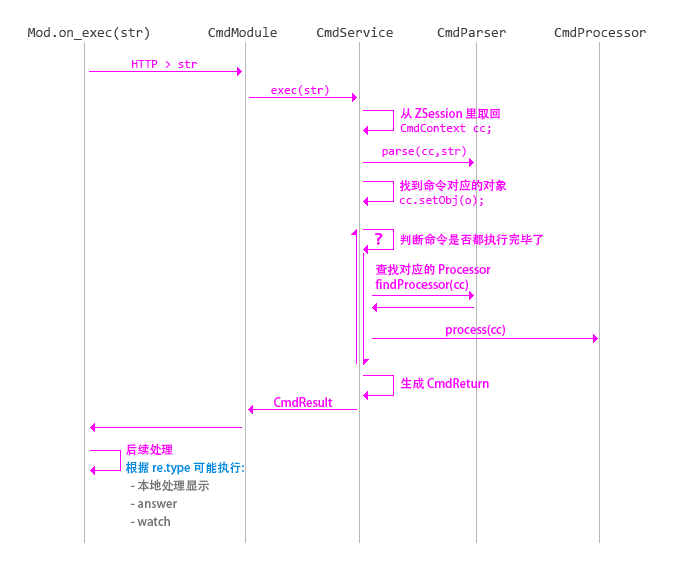
<style>
.page{position:relative;width:681px;height:565px;background:#ffffff}
.page>*{position:absolute;margin:0}
.t1{font:14px "Consolas";color:#404040}
.t2{font:12px "Consolas";color:#ff00ff}
.t3{font:12px "AdobeHeitiStd-Regular";color:#ff00ff}
.t4{font:12px/18px "AdobeHeitiStd-Regular";color:#767676}
.t5{font:12px/18px "AdobeHeitiStd-Regular";color:#ff00ff}
.t6{font:12px/18px "AdobeHeitiStd-Regular";color:#008ee3}
</style>
<div class="page">
<p class="t1" style="left:28px;top:27px;width:121px;height:13px">Mod.on_exec(str)</p>
<p class="t1" style="left:208px;top:27px;width:69px;height:10px">CmdModule</p>
<p class="t1" style="left:317px;top:27px;width:76px;height:10px">CmdService</p>
<p class="t1" style="left:437px;top:27px;width:69px;height:10px">CmdParser</p>
<p class="t1" style="left:554px;top:27px;width:92px;height:10px">CmdProcessor</p>
<p class="t2" style="left:132px;top:60px;width:66px;height:8px">HTTP &gt; str</p>
<p class="t2" style="left:271px;top:85px;width:58px;height:11px">exec(str)</p>
<p class="t3" style="left:400px;top:108px;width:100px;height:26px">从 ZSession 里取回<br><span class="t2">CmdContext cc;</span></p>
<p class="t2" style="left:382px;top:146px;width:84px;height:11px">parse(cc,str)</p>
<p class="t2" style="left:399px;top:179px;width:108px;height:27px"><span class="t3">找到命令对应的对象<br></span>cc.setObj(o);</p>
<p class="t3" style="left:400px;top:233px;width:143px;height:13px">判断命令是否都执行完毕了</p>
<p class="t3" style="left:375px;top:263px;width:116px;height:28px">查找对应的 Processor<br>findProcessor(cc)</p>
<p class="t3" style="left:446px;top:324px;width:59px;height:13px">process(cc)</p>
<p class="t3" style="left:401px;top:377px;width:88px;height:12px">生成 CmdReturn</p>
<p class="t3" style="left:274px;top:397px;width:59px;height:10px">CmdResult</p>
<p class="t4" style="left:125px;top:443px;width:119px;height:83px"><span class="t5">后续处理<br></span><span class="t6">根据 re.type 可能执行:<br></span>  - 本地处理显示<br>  - answer<br>  - watch</p>
</div>
